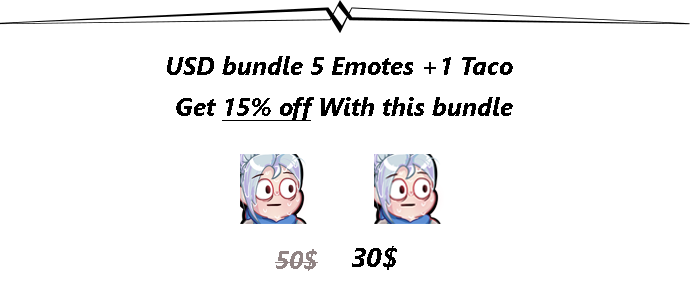
<style>
.page{position:relative;width:690px;height:300px;background:#ffffff}
.page>*{position:absolute;margin:0}
.t1{font:25px "SegoeUI-BoldItalic";color:#000000}
.t2{font:25px "SegoeUI-BoldItalic";color:#000000;text-decoration:underline}
.t3{font:27.2px "SegoeUI-BoldItalic";color:#000000}
.t4{font:25px "SegoeUI-BoldItalic";color:#918484}
</style>
<div class="page">
<p class="t1" style="left:167px;top:56px;width:346px;height:19px">USD bundle 5 Emotes +1 Taco</p>
<p class="t1" style="left:176px;top:97px;width:337px;height:24px">Get <span class="t2">15% off</span> With this bundle</p>
<p class="t3" style="left:352px;top:246px;width:45px;height:24px">30$</p>
<p class="t4" style="left:275px;top:249px;width:43px;height:22px">50$</p>
</div>
